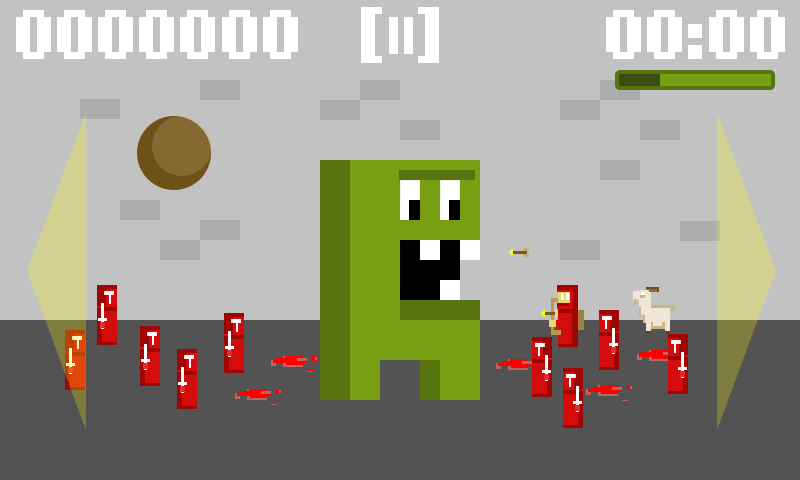
<style>
.page{position:relative;width:800px;height:480px;background:#c2c2c2}
.page>*{position:absolute;margin:0}
.t1{font:56px "NokiaCellphoneFC-Small";color:#ffffff}
.t2{font:36px "NokiaCellphoneFC-Small";color:#ffffff}
</style>
<div class="page">
<p class="t1" style="left:16px;top:10px;width:282px;height:49px">0000000</p>
<p class="t2" style="left:361px;top:7px;width:78px;height:56px"><span class="t1">[</span>||<span class="t1">]</span></p>
<p class="t1" style="left:606px;top:10px;width:179px;height:49px">00:00</p>
</div>
